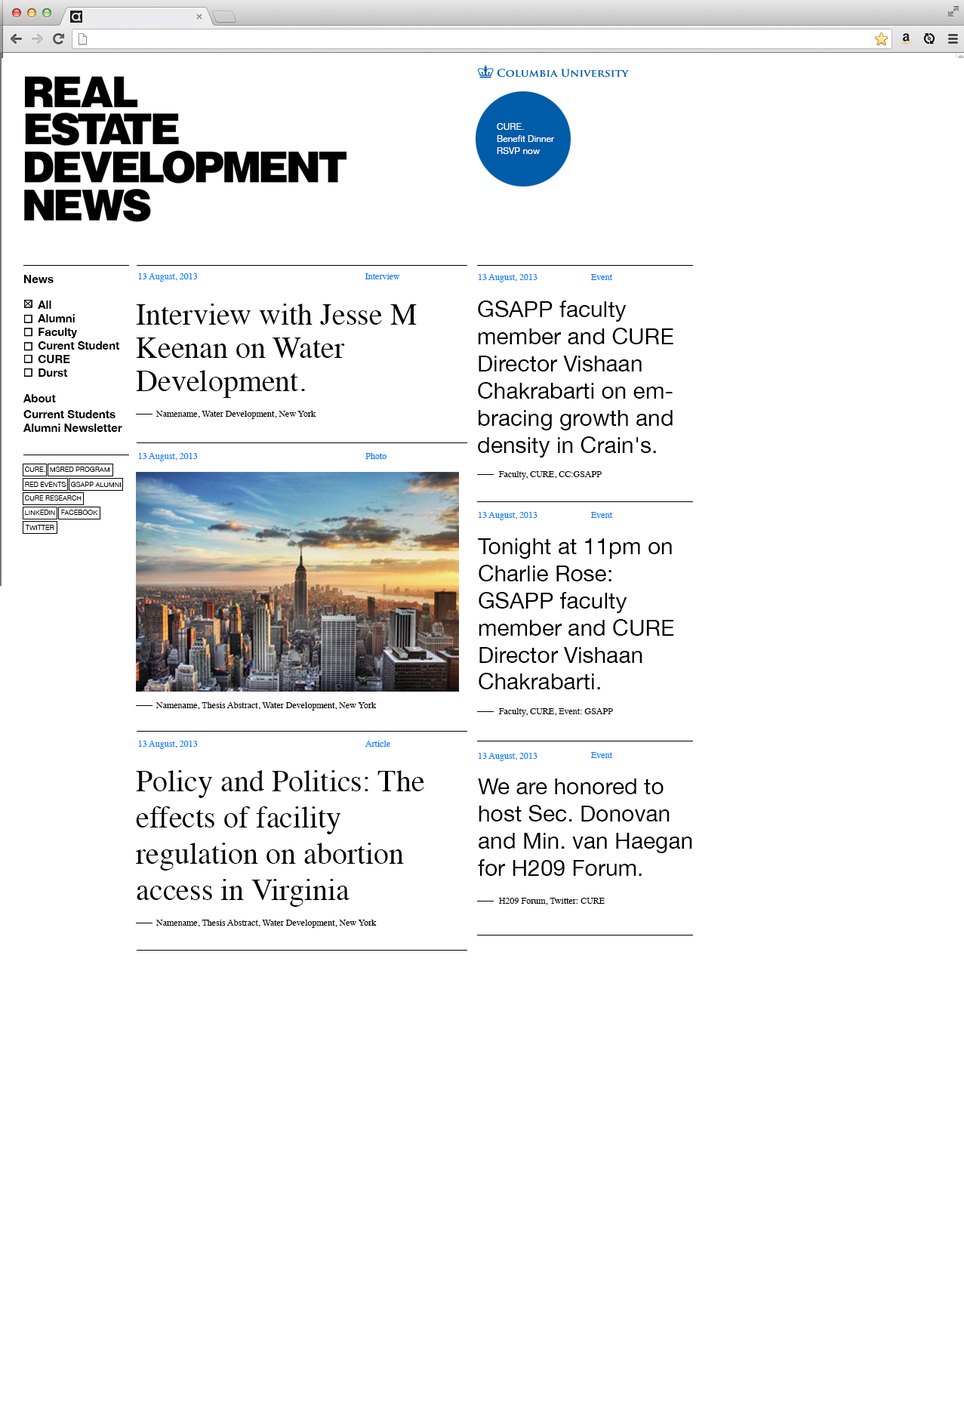
<style>
.page{position:relative;width:964px;height:1424px;background:#ffffff}
.page>*{position:absolute;margin:0}
.t1{font:9.1px/12.1px "HelveticaNeue";color:#ffffff}
.t2{font:11.3px "HelveticaNeue-Bold";color:#000001}
.t3{font:9px "Times-Roman";color:#007eff}
.t4{font:30.2px/33.2px "Times-Roman";color:#000000}
.t5{font:22.7px "HelveticaNeue";color:#000000}
.t6{font:9px "Times-Roman";color:#000000}
.t7{font:9.1px "Times-Roman";color:#007eff}
.t8{font:6.8px "HelveticaNeue";color:#000000}
.t9{font:9.1px "Times-Roman";color:#000000}
.t10{font:22.6px "HelveticaNeue";color:#000000}
.t11{font:30.2px "Times-Roman";color:#000000}
</style>
<div class="page">
<p class="t1" style="left:497px;top:123px;width:58px;height:31px">CURE. <br>Benefit Dinner<br>RSVP now</p>
<p class="t2" style="left:23px;top:275px;width:31px;height:8px">News</p>
<p class="t3" style="left:139px;top:273px;width:59px;height:9px">13 August, 2013</p>
<p class="t3" style="left:365px;top:273px;width:35px;height:6px">Interview</p>
<p class="t3" style="left:479px;top:274px;width:59px;height:8px">13 August, 2013</p>
<p class="t3" style="left:591px;top:274px;width:22px;height:6px">Event</p>
<p class="t2" style="left:38px;top:301px;width:82px;height:76px">All<br>Alumni<br>Faculty<br>Curent Student<br>CURE<br>Durst</p>
<p class="t4" style="left:136px;top:304px;width:281px;height:94px">Interview with Jesse M Keenan on Water <br>Development.</p>
<p class="t5" style="left:478px;top:301px;width:196px;height:157px">GSAPP faculty member and CURE Director Vishaan Chakrabarti on embracing growth and density in Crain's.</p>
<p class="t2" style="left:23px;top:394px;width:33px;height:9px">About</p>
<p class="t2" style="left:23px;top:410px;width:93px;height:8px">Current Students</p>
<p class="t6" style="left:156px;top:411px;width:160px;height:8px">Namename, Water Development, New York</p>
<p class="t2" style="left:23px;top:424px;width:99px;height:8px">Alumni Newsletter</p>
<p class="t3" style="left:139px;top:453px;width:59px;height:8px">13 August, 2013</p>
<p class="t7" style="left:366px;top:453px;width:21px;height:6px">Photo</p>
<p class="t8" style="left:25px;top:467px;width:20px;height:5px">CURE.</p>
<p class="t8" style="left:50px;top:467px;width:60px;height:5px">MSRED PROGRAM</p>
<p class="t9" style="left:499px;top:471px;width:103px;height:9px">Faculty, CURE, CC:GSAPP</p>
<p class="t8" style="left:25px;top:482px;width:41px;height:5px">RED EVENTS</p>
<p class="t8" style="left:71px;top:482px;width:50px;height:5px">GSAPP ALUMNI</p>
<p class="t8" style="left:25px;top:495px;width:57px;height:6px">CURE RESEARCH</p>
<p class="t8" style="left:25px;top:510px;width:30px;height:5px">LINKEDIN</p>
<p class="t8" style="left:61px;top:510px;width:37px;height:5px">FACEBOOK</p>
<p class="t3" style="left:479px;top:512px;width:59px;height:8px">13 August, 2013</p>
<p class="t3" style="left:591px;top:512px;width:22px;height:6px">Event</p>
<p class="t8" style="left:25px;top:525px;width:29px;height:5px">TWITTER</p>
<p class="t10" style="left:478px;top:538px;width:196px;height:152px">Tonight at 11pm on <br>Charlie Rose: GSAPP faculty member and CURE Director Vishaan Chakrabarti.</p>
<p class="t9" style="left:156px;top:702px;width:221px;height:9px">Namename, Thesis Abstract, Water Development, New York</p>
<p class="t9" style="left:499px;top:708px;width:114px;height:9px">Faculty, CURE, Event: GSAPP</p>
<p class="t3" style="left:139px;top:741px;width:59px;height:8px">13 August, 2013</p>
<p class="t7" style="left:365px;top:741px;width:25px;height:6px">Article</p>
<p class="t3" style="left:479px;top:753px;width:59px;height:8px">13 August, 2013</p>
<p class="t3" style="left:591px;top:752px;width:22px;height:6px">Event</p>
<p class="t11" style="left:136px;top:770px;width:288px;height:137px">Policy and Politics: The effects of facility <br>regulation on abortion access in Virginia</p>
<p class="t5" style="left:478px;top:779px;width:215px;height:97px">We are honored to host Sec. Donovan and Min. van Haegan for H209 Forum.</p>
<p class="t9" style="left:499px;top:898px;width:106px;height:8px">H209 Forum, Twitter: CURE</p>
<p class="t6" style="left:156px;top:920px;width:221px;height:8px">Namename, Thesis Abstract, Water Development, New York</p>
</div>
